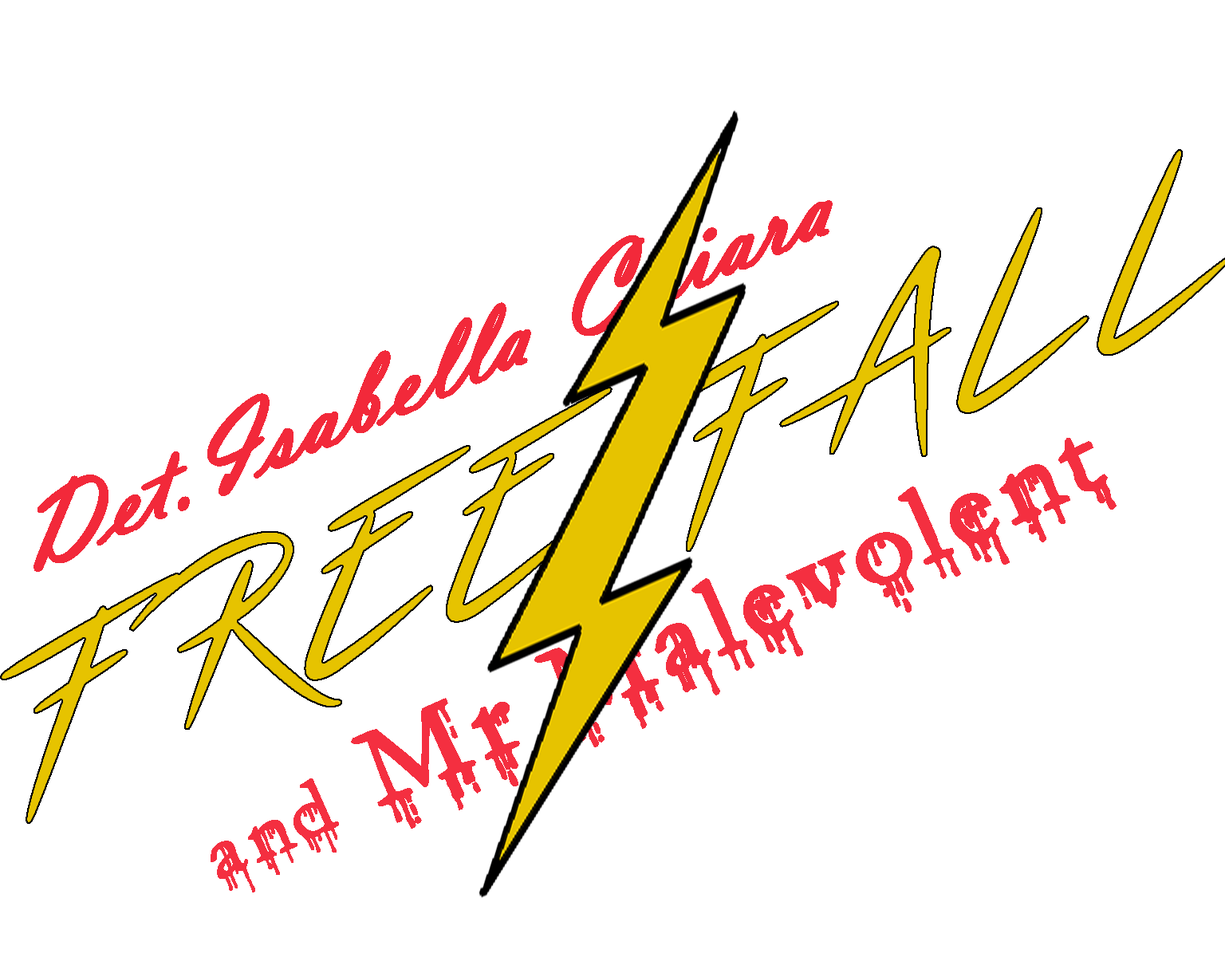
<style>
.page{position:relative;width:1225px;height:973px;background:#ffffff}
.page>*{position:absolute;margin:0}
.t1{font:106.4px "VladimirScript";color:#f2293a;font-weight:bold;scale:1.12 1}
.t2{font:106.4px "SFGushingMeadow";color:#f42f40;font-weight:bold;scale:1.12 1}
.t3{font:76.4px "SFGushingMeadow";color:#f42f40;font-weight:bold;scale:1.12 1}
</style>
<div class="page">
<p class="t1" style="left:34px;top:200px;width:799px;height:372px;rotate:-23deg">Det.Isabella Chiara</p>
<p class="t2" style="left:211px;top:438px;width:906px;height:455px;rotate:-24deg"><span class="t3">and</span> Mr Malevolent</p>
</div>
